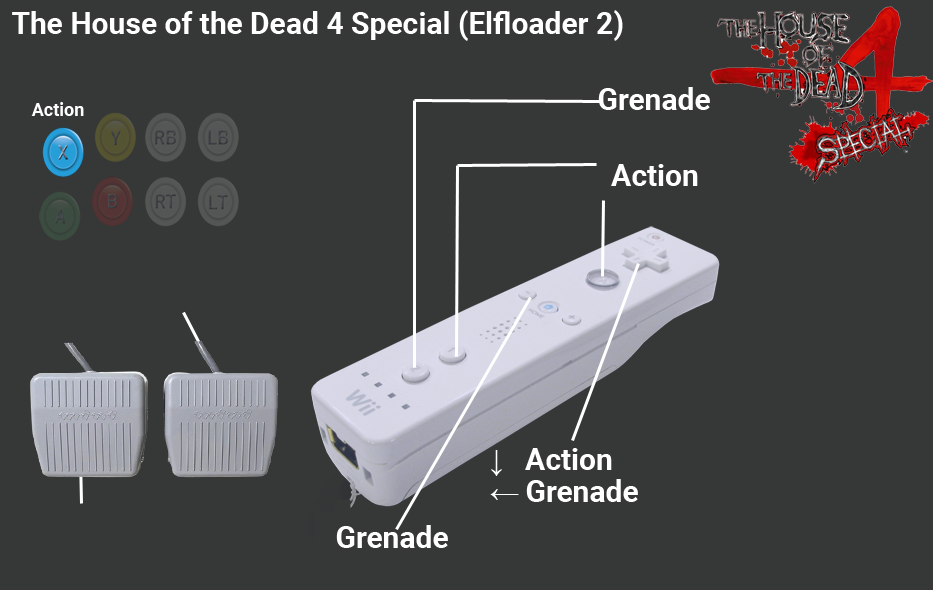
<style>
.page{position:relative;width:933px;height:590px;background:#363838}
.page>*{position:absolute;margin:0}
.t1{font:30px "Roboto-Bold";color:#ffffff}
.t2{font:18px "Roboto-Bold";color:#ffffff}
.t3{font:30px "MicrosoftSansSerif";color:#ffffff}
</style>
<div class="page">
<p class="t1" style="left:12px;top:10px;width:611px;height:31px">The House of the Dead 4 Special (Elfloader 2)</p>
<p class="t1" style="left:598px;top:87px;width:112px;height:23px">Grenade</p>
<p class="t2" style="left:31px;top:102px;width:53px;height:14px">Action</p>
<p class="t1" style="left:611px;top:164px;width:87px;height:22px">Action</p>
<p class="t1" style="left:491px;top:448px;width:121px;height:28px"><span class="t3">↓ </span>Action</p>
<p class="t1" style="left:490px;top:479px;width:148px;height:23px"><span class="t3">← </span>Grenade</p>
<p class="t1" style="left:336px;top:525px;width:112px;height:23px">Grenade</p>
</div>
